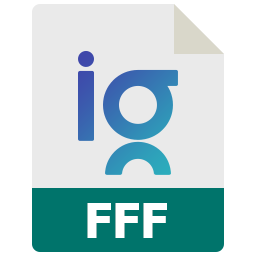
<style>
.page{position:relative;width:256px;height:256px;background:#eaeaea}
.page>*{position:absolute;margin:0}
.t1{font:48px "Tahoma-Bold";color:#ffffff}
</style>
<div class="page">
<p class="t1" style="left:87px;top:203px;width:80px;height:35px">FFF</p>
</div>
